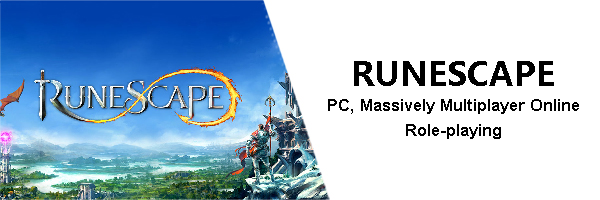
<style>
.page{position:relative;width:600px;height:200px;background:#ffffff}
.page>*{position:absolute;margin:0}
.t1{font:16.7px/25px "Arial-BoldMT";color:#000000}
.t2{font:33.3px/41.7px "MicrosoftYaHei-Bold";color:#000000}
</style>
<div class="page">
<p class="t1" style="left:328px;top:61px;width:251px;height:78px;text-align:center"><span class="t2">RUNESCAPE<br></span>PC, Massively Multiplayer Online Role-playing</p>
</div>
